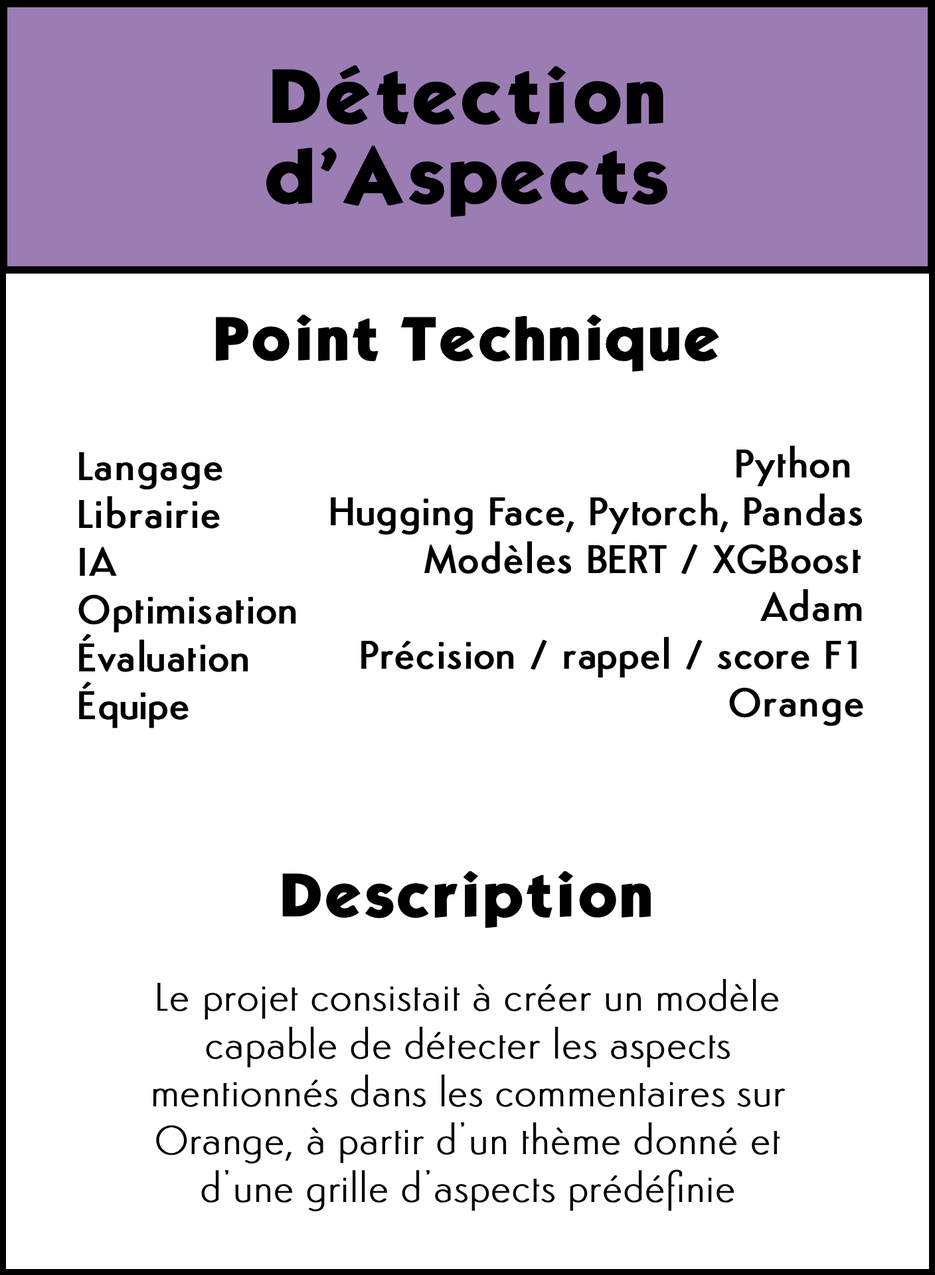
<style>
.page{position:relative;width:935px;height:1275px;background:#ffffff}
.page>*{position:absolute;margin:0}
.t1{font:66.4px "KabelBdNormal";color:#000000;font-weight:bold}
.t2{font:53.1px "KabelBdNormal";color:#000000;font-weight:bold}
.t3{font:39.8px "Semplicita-Medium";color:#000000;font-weight:bold}
.t4{font:39.8px "Semplicita-Light";color:#000000;font-weight:bold}
</style>
<div class="page">
<p class="t1" style="left:266px;top:65px;width:401px;height:152px;text-align:center">Détection d'Aspects</p>
<p class="t2" style="left:216px;top:314px;width:503px;height:58px">Point Technique</p>
<p class="t3" style="left:331px;top:446px;width:532px;height:280px;text-align:right">Python<br>Hugging Face, Pytorch, Pandas <br> Modèles BERT / XGBoost<br>Adam<br>Précision / rappel / score F1<br>Orange</p>
<p class="t3" style="left:78px;top:452px;width:218px;height:277px">Langage<br>Librairie<br>IA<br>Optimisation<br>Évaluation<br>Équipe</p>
<p class="t2" style="left:282px;top:871px;width:369px;height:57px">Description</p>
<p class="t4" style="left:153px;top:979px;width:633px;height:232px;text-align:center">Le projet consistait à créer un modèle capable de détecter les aspects mentionnés dans les commentaires sur Orange, à partir d’un thème donné et d’une grille d’aspects prédéfinie</p>
</div>
